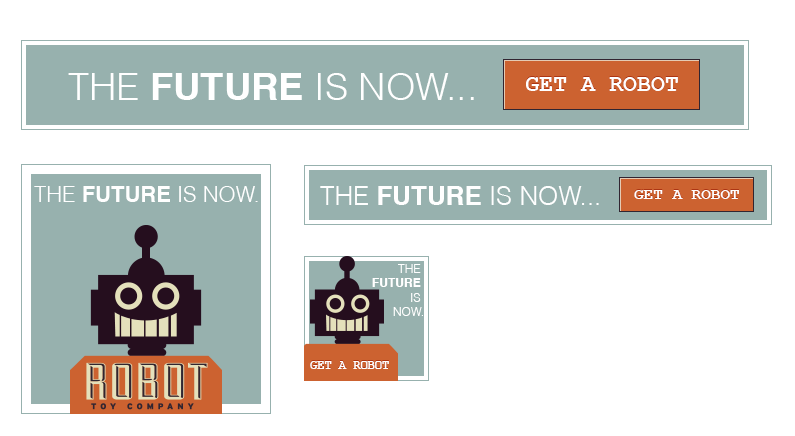
<style>
.page{position:relative;width:795px;height:436px;background:#ffffff}
.page>*{position:absolute;margin:0}
.t1{font:37.9px "Helvetica-Light";color:#ffffff}
.t2{font:37.9px "Helvetica-Bold";color:#ffffff}
.t3{font:23.3px "CourierNewPS-BoldMT";color:#ffffff}
.t4{font:22px "Helvetica-Light";color:#ffffff}
.t5{font:22px "Helvetica-Bold";color:#ffffff}
.t6{font:26px "Helvetica-Light";color:#ffffff}
.t7{font:26px "Helvetica-Bold";color:#ffffff}
.t8{font:16px "CourierNewPS-BoldMT";color:#ffffff}
.t9{font:12px "Helvetica-Light";color:#ffffff}
.t10{font:12px "Helvetica-Bold";color:#ffffff}
.t11{font:12px "CourierNewPS-BoldMT";color:#ffffff}
</style>
<div class="page">
<p class="t1" style="left:68px;top:73px;width:406px;height:27px">THE <span class="t2">FUTURE</span> IS NOW...</p>
<p class="t3" style="left:526px;top:77px;width:152px;height:14px">GET A ROBOT</p>
<p class="t4" style="left:34px;top:186px;width:224px;height:16px">THE <span class="t5">FUTURE</span> IS NOW.</p>
<p class="t6" style="left:320px;top:186px;width:279px;height:19px">THE <span class="t7">FUTURE</span> IS NOW...</p>
<p class="t8" style="left:634px;top:190px;width:105px;height:9px">GET A ROBOT</p>
<p class="t9" style="left:372px;top:264px;width:51px;height:52px;text-align:right">THE <br><span class="t10">FUTURE</span> <br>IS <br>NOW.</p>
<p class="t11" style="left:310px;top:361px;width:79px;height:8px">GET A ROBOT</p>
</div>
